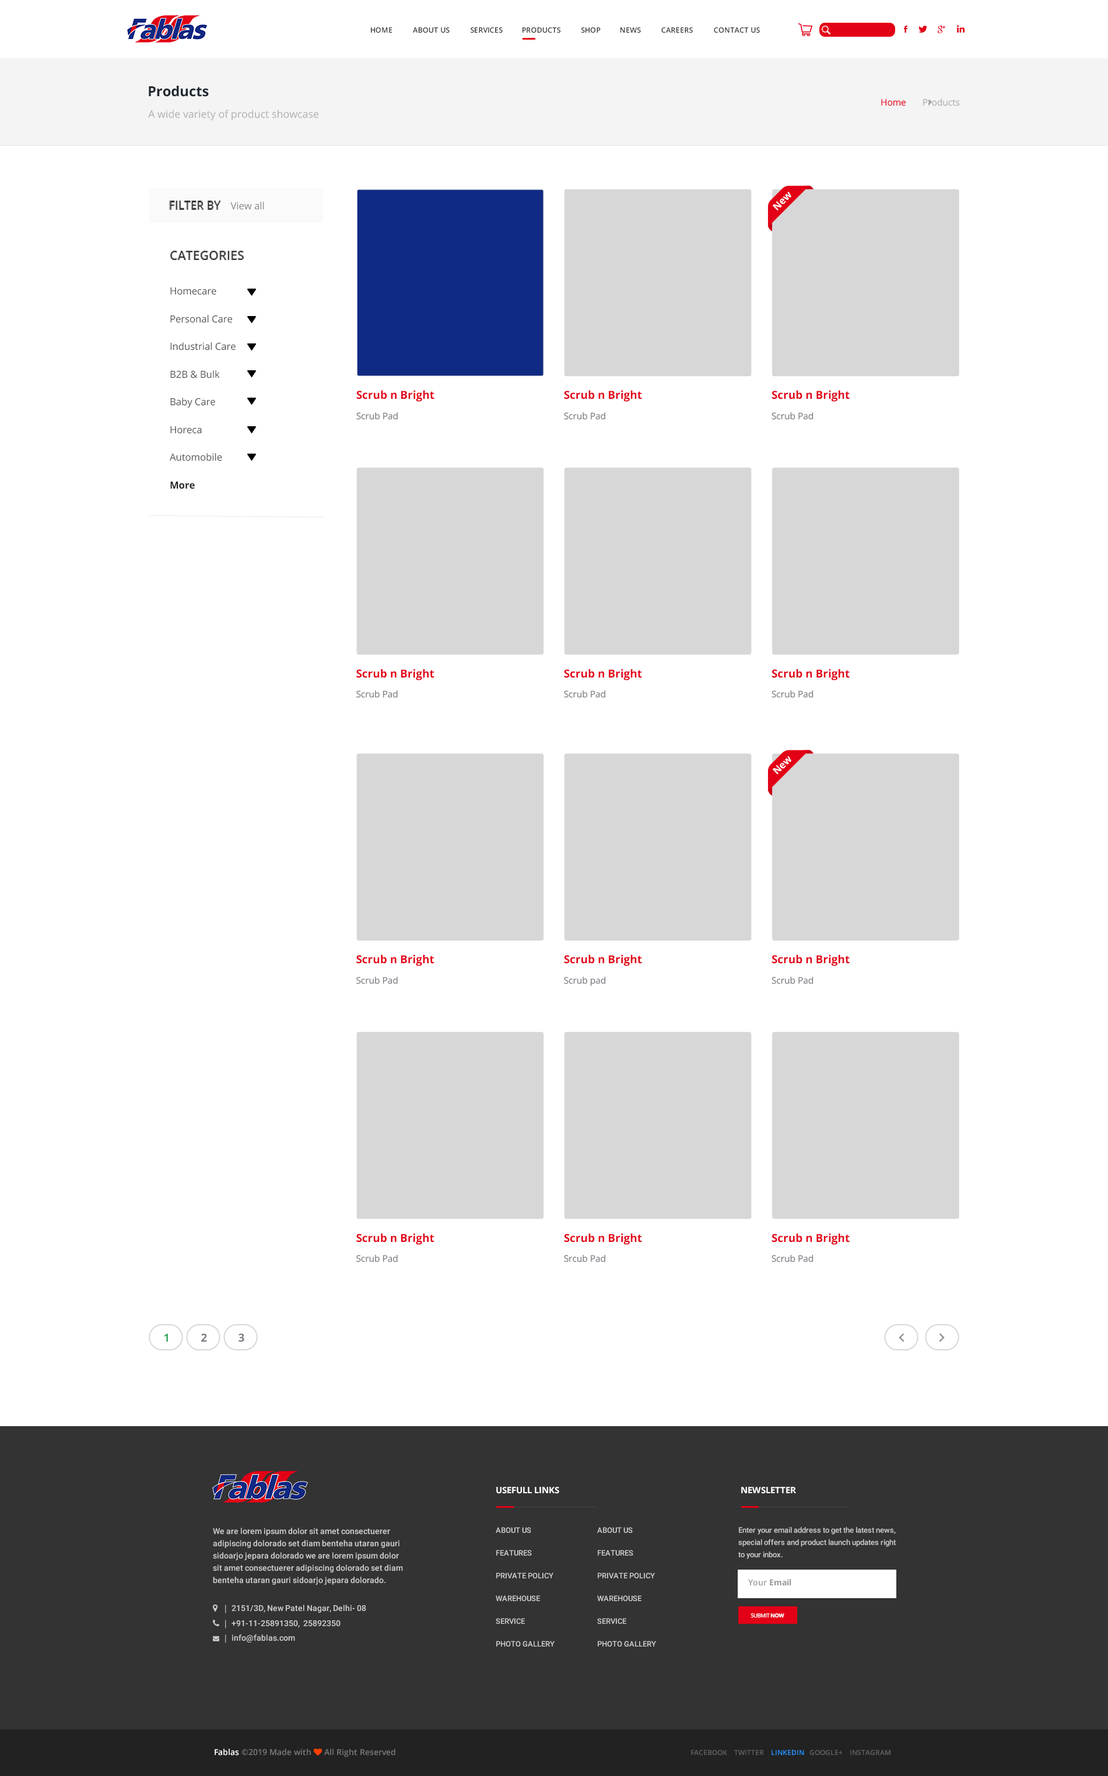
<style>
.page{position:relative;width:1108px;height:1776px;background:#ffffff}
.page>*{position:absolute;margin:0}
.t1{font:7.3px "OpenSans-SemiBold";color:#333333}
.t2{font:8px "OpenSans-SemiBold";color:#333333}
.t3{font:13.8px "OpenSans-Bold";color:#202830}
.t4{font:9px "OpenSans";color:#afb0b4}
.t5{font:9px "OpenSans";color:#e30016}
.t6{font:10.4px "OpenSans";color:#afb0b4}
.t7{font:9.7px "OpenSans-Bold";color:#ffffff}
.t8{font:11.1px "OpenSans-Semibold";color:#333333;text-transform:uppercase}
.t9{font:9.7px "OpenSans";color:#888888}
.t10{font:12.5px "OpenSans-Semibold";color:#333333;text-transform:uppercase}
.t11{font:9.7px/27.7px "OpenSans";color:#555555}
.t12{font:11.1px "OpenSans-Bold";color:#e30016}
.t13{font:9px "OpenSans";color:#7a7c82}
.t14{font:9.7px "OpenSans-Bold";color:#222222}
.t15{font:11.1px "OpenSans-Bold";color:#3daa62}
.t16{font:11.1px "OpenSans-Bold";color:#7a7c82}
.t17{font:8.7px "OpenSans-Bold";color:#ffffff}
.t18{font:8.2px/12.2px "Roboto-Medium";color:#cccccc}
.t19{font:7.6px/22.7px "Roboto-Medium";color:#cccccc}
.t20{font:7.6px/12.1px "Roboto-Medium";color:#cccccc}
.t21{font:8.2px "OpenSans-Bold";color:#999999}
.t22{font:8.2px "OpenSans-SemiBold";color:#999999}
.t23{font:5.4px "OpenSans";letter-spacing:-0.04em;color:#ffffff}
.t24{font:5.4px "OpenSans-Bold";letter-spacing:-0.04em;color:#ffffff}
.t25{font:7px "OpenSans-SemiBold";color:#616161}
.t26{font:7px "OpenSans-SemiBold";color:#2692ff}
</style>
<div class="page">
<p class="t1" style="left:371px;top:27px;width:21px;height:6px">HOME</p>
<p class="t1" style="left:413px;top:27px;width:36px;height:6px"><span class="t2">                     </span>ABOUT US</p>
<p class="t1" style="left:470px;top:27px;width:33px;height:6px"><span class="t2">                                                 </span>SERVICES</p>
<p class="t1" style="left:522px;top:27px;width:38px;height:6px"><span class="t2">                                                                                </span>PRODUCTS</p>
<p class="t1" style="left:581px;top:27px;width:19px;height:6px"><span class="t2">                                                                                                              </span>SHOP</p>
<p class="t1" style="left:620px;top:27px;width:21px;height:6px"><span class="t2">                                                                                                                                   </span>NEWS</p>
<p class="t1" style="left:661px;top:27px;width:32px;height:6px"><span class="t2">                                                                                                                                                          </span>CAREERS</p>
<p class="t1" style="left:714px;top:27px;width:46px;height:6px"><span class="t2">                                                                                                                                                                                       </span>CONTACT US</p>
<p class="t3" style="left:149px;top:86px;width:60px;height:11px">Products</p>
<p class="t4" style="left:881px;top:99px;width:79px;height:7px"><span class="t5">Home</span>       Products</p>
<p class="t6" style="left:148px;top:110px;width:171px;height:11px">A wide variety of product showcase</p>
<p class="t7" style="left:772px;top:191px;width:19px;height:19px;rotate:-45deg">New</p>
<p class="t8" style="left:169px;top:201px;width:52px;height:9px">Filter By</p>
<p class="t9" style="left:230px;top:202px;width:34px;height:8px">View all</p>
<p class="t10" style="left:169px;top:251px;width:75px;height:9px">Categories</p>
<p class="t11" style="left:170px;top:287px;width:66px;height:174px">Homecare<br>Personal Care<br>Industrial Care<br>B2B &amp; Bulk<br>Baby Care<br>Horeca<br>Automobile</p>
<p class="t12" style="left:356px;top:390px;width:78px;height:12px">Scrub n Bright</p>
<p class="t12" style="left:564px;top:390px;width:78px;height:12px">Scrub n Bright</p>
<p class="t12" style="left:771px;top:390px;width:78px;height:12px">Scrub n Bright</p>
<p class="t13" style="left:356px;top:412px;width:42px;height:8px">Scrub Pad</p>
<p class="t13" style="left:564px;top:412px;width:41px;height:8px">Scrub Pad</p>
<p class="t13" style="left:771px;top:412px;width:42px;height:8px">Scrub Pad</p>
<p class="t14" style="left:170px;top:482px;width:25px;height:7px">More</p>
<p class="t12" style="left:356px;top:669px;width:78px;height:11px">Scrub n Bright</p>
<p class="t12" style="left:564px;top:669px;width:78px;height:11px">Scrub n Bright</p>
<p class="t12" style="left:771px;top:669px;width:78px;height:11px">Scrub n Bright</p>
<p class="t13" style="left:356px;top:690px;width:42px;height:8px">Scrub Pad</p>
<p class="t13" style="left:564px;top:690px;width:41px;height:8px">Scrub Pad</p>
<p class="t13" style="left:771px;top:690px;width:42px;height:8px">Scrub Pad</p>
<p class="t7" style="left:772px;top:756px;width:19px;height:18px;rotate:-45deg">New</p>
<p class="t12" style="left:356px;top:954px;width:78px;height:12px">Scrub n Bright</p>
<p class="t12" style="left:564px;top:954px;width:78px;height:12px">Scrub n Bright</p>
<p class="t12" style="left:771px;top:954px;width:78px;height:12px">Scrub n Bright</p>
<p class="t13" style="left:356px;top:976px;width:42px;height:8px">Scrub Pad</p>
<p class="t13" style="left:564px;top:976px;width:42px;height:10px">Scrub pad</p>
<p class="t13" style="left:771px;top:976px;width:42px;height:8px">Scrub Pad</p>
<p class="t12" style="left:356px;top:1233px;width:78px;height:12px">Scrub n Bright</p>
<p class="t12" style="left:564px;top:1233px;width:78px;height:12px">Scrub n Bright</p>
<p class="t12" style="left:771px;top:1233px;width:78px;height:12px">Scrub n Bright</p>
<p class="t13" style="left:356px;top:1255px;width:42px;height:7px">Scrub Pad</p>
<p class="t13" style="left:564px;top:1255px;width:41px;height:7px">Srcub Pad</p>
<p class="t13" style="left:771px;top:1255px;width:42px;height:7px">Scrub Pad</p>
<p class="t15" style="left:164px;top:1333px;width:4px;height:8px">1</p>
<p class="t16" style="left:201px;top:1333px;width:6px;height:8px">2</p>
<p class="t16" style="left:238px;top:1333px;width:6px;height:9px">3</p>
<p class="t17" style="left:496px;top:1487px;width:63px;height:7px">USEFULL LINKS</p>
<p class="t17" style="left:741px;top:1487px;width:55px;height:7px">NEWSLETTER</p>
<p class="t18" style="left:213px;top:1527px;width:190px;height:57px">We are lorem ipsum dolor sit amet consectuerer adipiscing dolorado set diam benteha utaran gauri sidoarjo jepara dolorado we are lorem ipsum dolor sit amet consectuerer adipiscing dolorado set diam benteha utaran gauri sidoarjo jepara dolorado.</p>
<p class="t19" style="left:496px;top:1527px;width:58px;height:119px">ABOUT US<br>FEATURES<br>PRIVATE POLICY<br>WAREHOUSE<br>SERVICE<br>PHOTO GALLERY</p>
<p class="t19" style="left:597px;top:1527px;width:59px;height:119px">ABOUT US<br>FEATURES<br>PRIVATE POLICY<br>WAREHOUSE<br>SERVICE<br>PHOTO GALLERY</p>
<p class="t20" style="left:738px;top:1527px;width:157px;height:32px">Enter your email address to get the latest news, special offers and product launch updates right to your inbox.</p>
<p class="t21" style="left:748px;top:1579px;width:43px;height:7px"><span class="t22">Your </span>Email</p>
<p class="t23" style="left:750px;top:1613px;width:34px;height:5px">SUBMIT <span class="t24">NOW</span></p>
<p class="t25" style="left:691px;top:1749px;width:199px;height:6px">FACEBOOK    TWITTER    <span class="t26">LINKEDIN</span>   GOOGLE+    INSTAGRAM</p>
</div>
